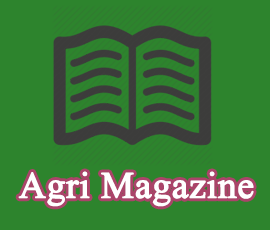
<style>
.page{position:relative;width:270px;height:230px;background:#2d842d}
.page>*{position:absolute;margin:0}
.t1{font:37px "TimesNewRomanPSMT";color:#ffffff;font-weight:bold}
</style>
<div class="page">
<p class="t1" style="left:18px;top:171px;width:236px;height:36px">Agri Magazine</p>
</div>
